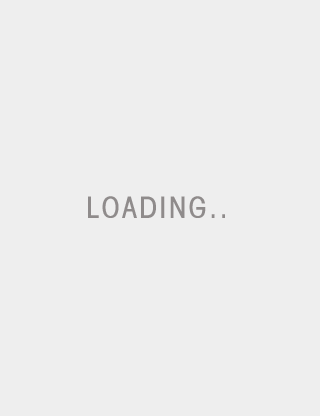
<style>
.page{position:relative;width:320px;height:416px;background:#eeeeee}
.page>*{position:absolute;margin:0}
.t1{font:29.9px "JMeiHei";letter-spacing:0.075em;color:#8f8b8b;text-transform:uppercase}
</style>
<div class="page">
<p class="t1" style="left:88px;top:196px;width:137px;height:22px">loading..</p>
</div>
